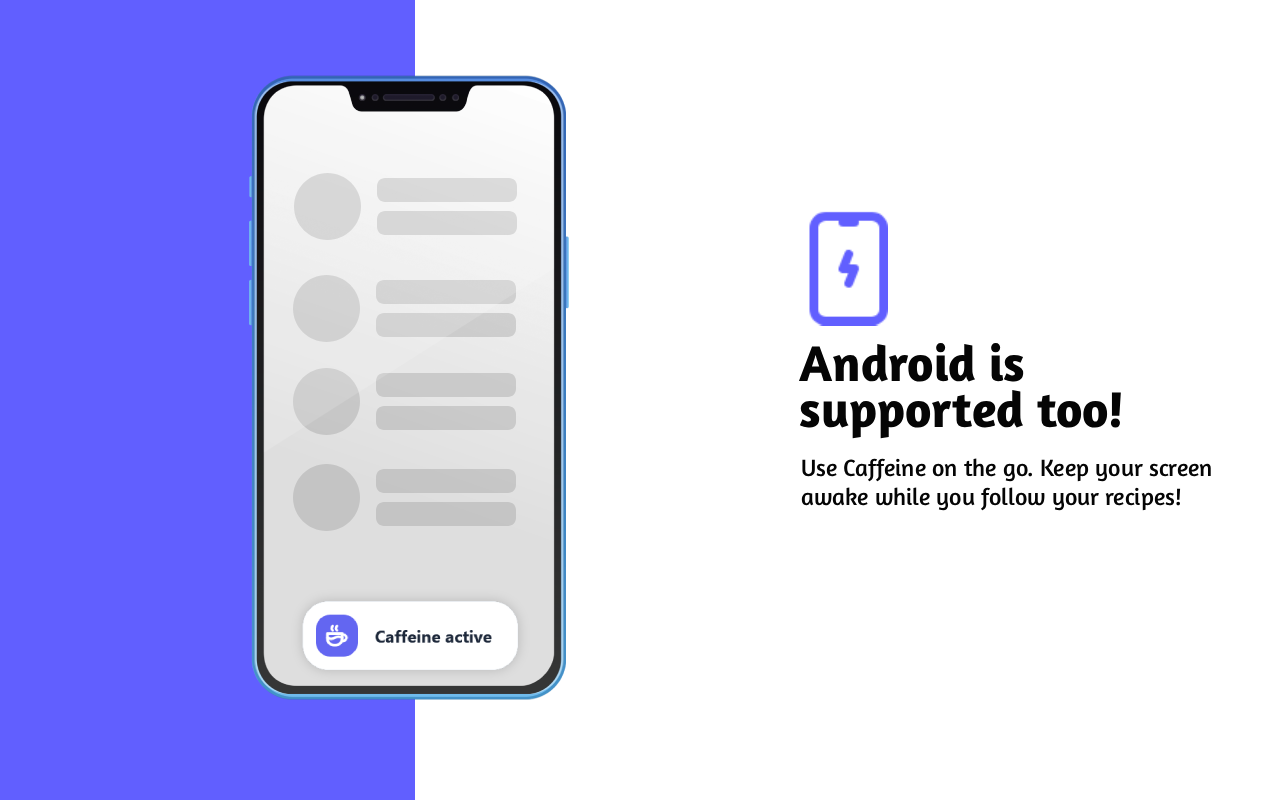
<style>
.page{position:relative;width:1280px;height:800px;background:#ffffff}
.page>*{position:absolute;margin:0}
.t1{font:51px "Amaranth-Bold";color:#050505}
.t2{font:24px "Amaranth-Regular";color:#050505}
</style>
<div class="page">
<p class="t1" style="left:798px;top:343px;width:323px;height:96px">Android is supported too!</p>
<p class="t2" style="left:801px;top:458px;width:410px;height:53px">Use Caffeine on the go. Keep your screen awake while you follow your recipes!</p>
</div>
